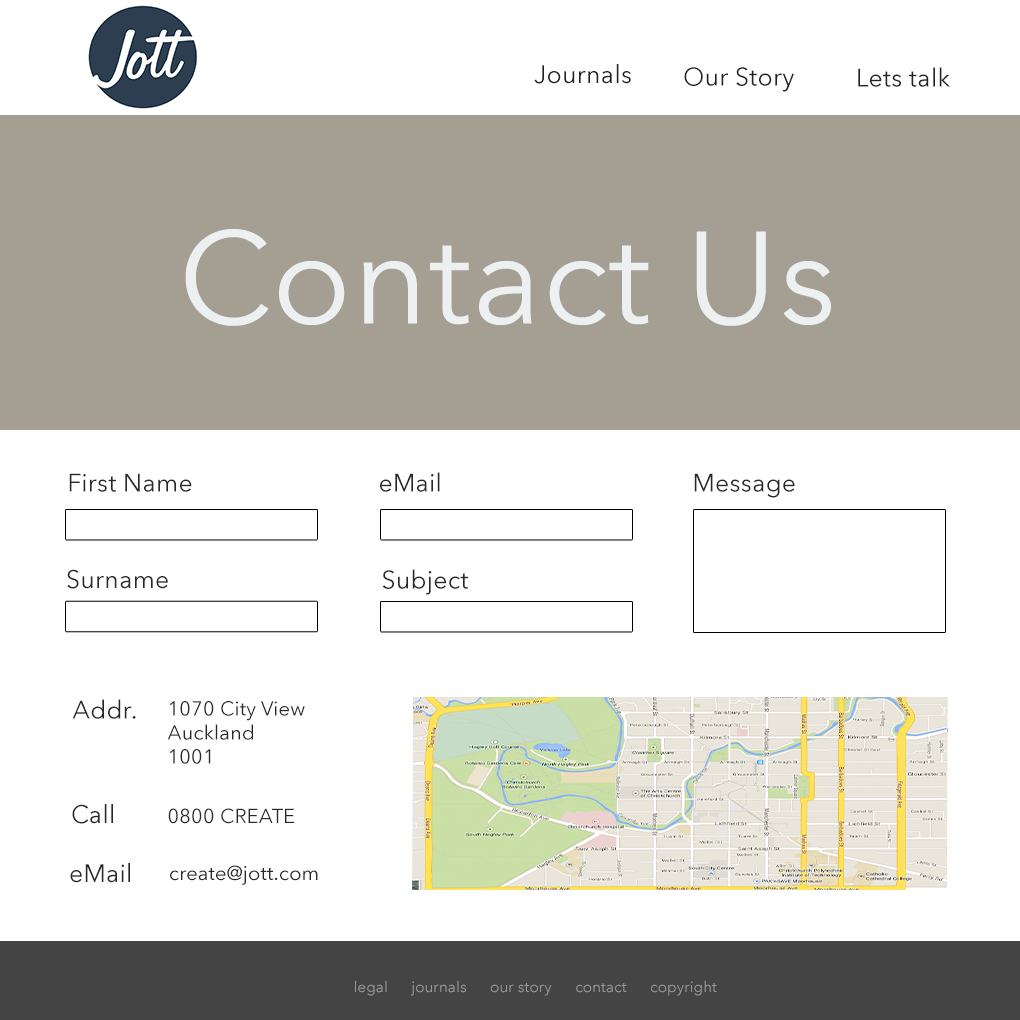
<style>
.page{position:relative;width:1020px;height:1020px;background:#ffffff}
.page>*{position:absolute;margin:0}
.t1{font:25px "AvenirNextLTW01-Regular";letter-spacing:0.01em;color:#222222}
.t2{font:130px "AvenirNextLTW01-Regular";letter-spacing:0.01em;color:#ecf0f1}
.t3{font:25px "AvenirNextLTW01-Regular";letter-spacing:0.01em;color:#282828}
.t4{font:20px/24px "AvenirNextLTW01-Regular";letter-spacing:0.01em;color:#282828}
.t5{font:20px "AvenirNextLTW01-Regular";letter-spacing:0.01em;color:#282828}
.t6{font:15px "AvenirNextLTW01-Regular";letter-spacing:0.01em;color:#999999}
</style>
<div class="page">
<p class="t1" style="left:534px;top:64px;width:97px;height:20px">Journals</p>
<p class="t1" style="left:684px;top:67px;width:110px;height:25px">Our Story</p>
<p class="t1" style="left:858px;top:67px;width:92px;height:20px">Lets talk</p>
<p class="t2" style="left:185px;top:229px;width:646px;height:97px">Contact Us</p>
<p class="t3" style="left:69px;top:473px;width:123px;height:19px">First Name</p>
<p class="t3" style="left:380px;top:472px;width:60px;height:20px">eMail</p>
<p class="t3" style="left:694px;top:473px;width:101px;height:25px">Message</p>
<p class="t3" style="left:67px;top:569px;width:101px;height:20px">Surname</p>
<p class="t3" style="left:382px;top:569px;width:86px;height:26px">Subject</p>
<p class="t3" style="left:72px;top:699px;width:64px;height:20px">Addr.</p>
<p class="t4" style="left:167px;top:701px;width:138px;height:63px">1070 City View<br>Auckland<br>1001</p>
<p class="t3" style="left:72px;top:804px;width:41px;height:20px">Call</p>
<p class="t5" style="left:168px;top:808px;width:126px;height:16px">0800 CREATE</p>
<p class="t3" style="left:70px;top:863px;width:60px;height:20px">eMail</p>
<p class="t5" style="left:170px;top:865px;width:148px;height:20px">create@jott.com</p>
<p class="t6" style="left:355px;top:980px;width:362px;height:16px">legal      journals      our story      contact      copyright</p>
</div>
